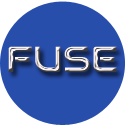
<style>
.page{position:relative;width:128px;height:128px;background:#284eac}
.page>*{position:absolute;margin:0}
.t1{font:36px "Audiowide-Regular"}
</style>
<div class="page">
<p class="t1" style="left:8px;top:46px;width:109px;height:26px">FUSE</p>
</div>
